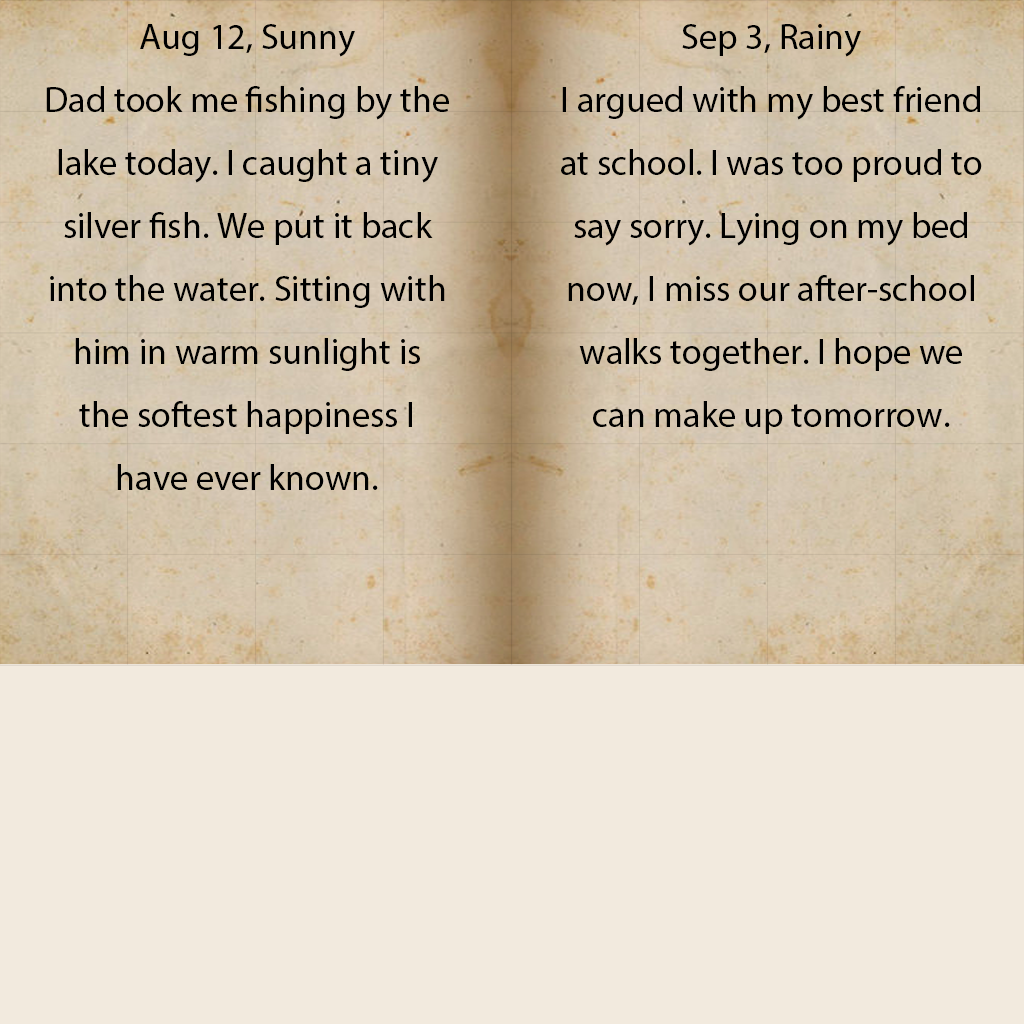
<style>
.page{position:relative;width:1024px;height:1024px;background:#f2eade}
.page>*{position:absolute;margin:0}
.t1{font:36px "MyriadPro-Regular";color:#000000}
</style>
<div class="page">
<p class="t1" style="left:46px;top:24px;width:403px;height:466px;text-align:center">Aug 12, Sunny<br>Dad took me fishing by the lake today. I caught a tiny silver fish. We put it back into the water. Sitting with him in warm sunlight is the softest happiness I have ever known.</p>
<p class="t1" style="left:561px;top:24px;width:421px;height:410px;text-align:center">Sep 3, Rainy<br>I argued with my best friend at school. I was too proud to say sorry. Lying on my bed now, I miss our after-school walks together. I hope we can make up tomorrow.</p>
</div>
